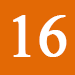
<style>
.page{position:relative;width:75px;height:75px;background:#e36905}
.page>*{position:absolute;margin:0}
.t1{font:60px "TimesNewRomanPSMT";color:#ffffff;font-weight:bold}
</style>
<div class="page">
<p class="t1" style="left:13px;top:15px;width:54px;height:42px">16</p>
</div>
